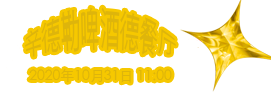
<style>
.page{position:relative;width:271px;height:97px;background:#ffffff}
.page>*{position:absolute;margin:0}
.t1{font:20.3px "STHeitiSC-Light";color:#deb50b;scale:0.94 1}
.t2{font:14px "STHeitiSC-Light";color:#deb50b}
</style>
<div class="page">
<p class="t1" style="left:25px;top:7px;width:151px;height:50px">辛德勒啤酒德餐厅</p>
<p class="t2" style="left:29px;top:69px;width:143px;height:14px">2020年10月31日 11:00</p>
</div>
